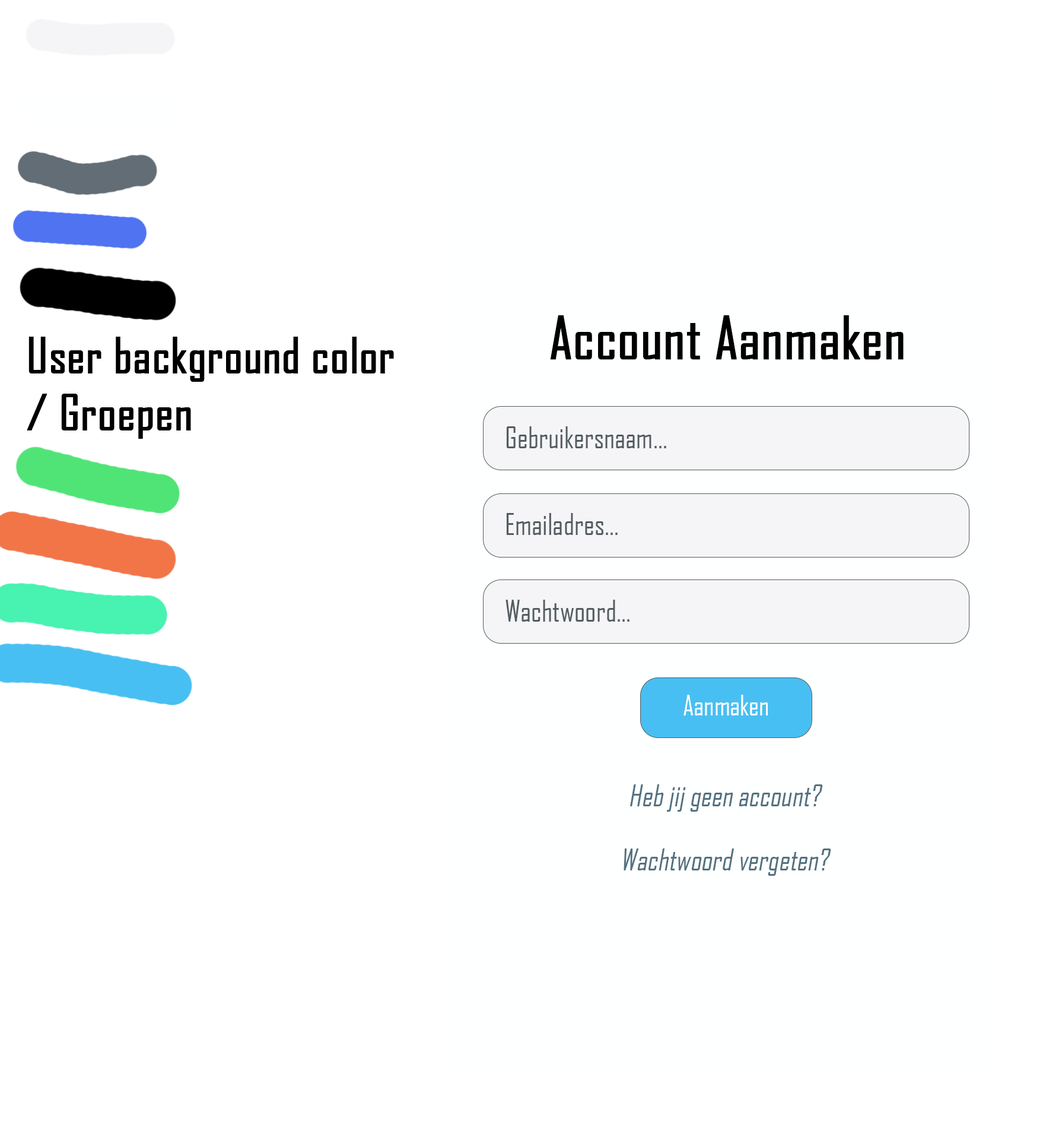
<style>
.page{position:relative;width:1046px;height:1140px;background:#ffffff}
.page>*{position:absolute;margin:0}
.t1{font:56.4px "AgencyFB-Reg";color:#000000;font-weight:bold}
.t2{font:47.5px "AgencyFB-Reg";color:#000000;font-weight:bold}
.t3{font:28.6px "AgencyFB-Reg";color:#535c60}
.t4{font:27.1px "AgencyFB-Reg";color:#ffffff}
.t5{font:28.6px "AgencyFB-Reg";color:#537180;font-style:italic}
</style>
<div class="page">
<p class="t1" style="left:550px;top:315px;width:354px;height:45px">Account Aanmaken</p>
<p class="t2" style="left:27px;top:337px;width:367px;height:102px">User background color<br>/ Groepen</p>
<p class="t3" style="left:506px;top:426px;width:161px;height:22px">Gebruikersnaam...</p>
<p class="t3" style="left:506px;top:513px;width:112px;height:22px">Emailadres...</p>
<p class="t3" style="left:506px;top:599px;width:124px;height:22px">Wachtwoord...</p>
<p class="t4" style="left:684px;top:694px;width:84px;height:21px">Aanmaken</p>
<p class="t5" style="left:630px;top:784px;width:193px;height:27px">Heb jij geen account?</p>
<p class="t5" style="left:624px;top:848px;width:208px;height:27px">Wachtwoord vergeten?</p>
</div>
